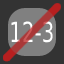
<style>
.page{position:relative;width:64px;height:64px;background:#333333}
.page>*{position:absolute;margin:0}
.t1{font:27.8px "DejaVuSans";color:#ffffff;scale:0.71 1}
</style>
<div class="page">
<p class="t1" style="left:11px;top:21px;width:42px;height:22px">12-3</p>
</div>
